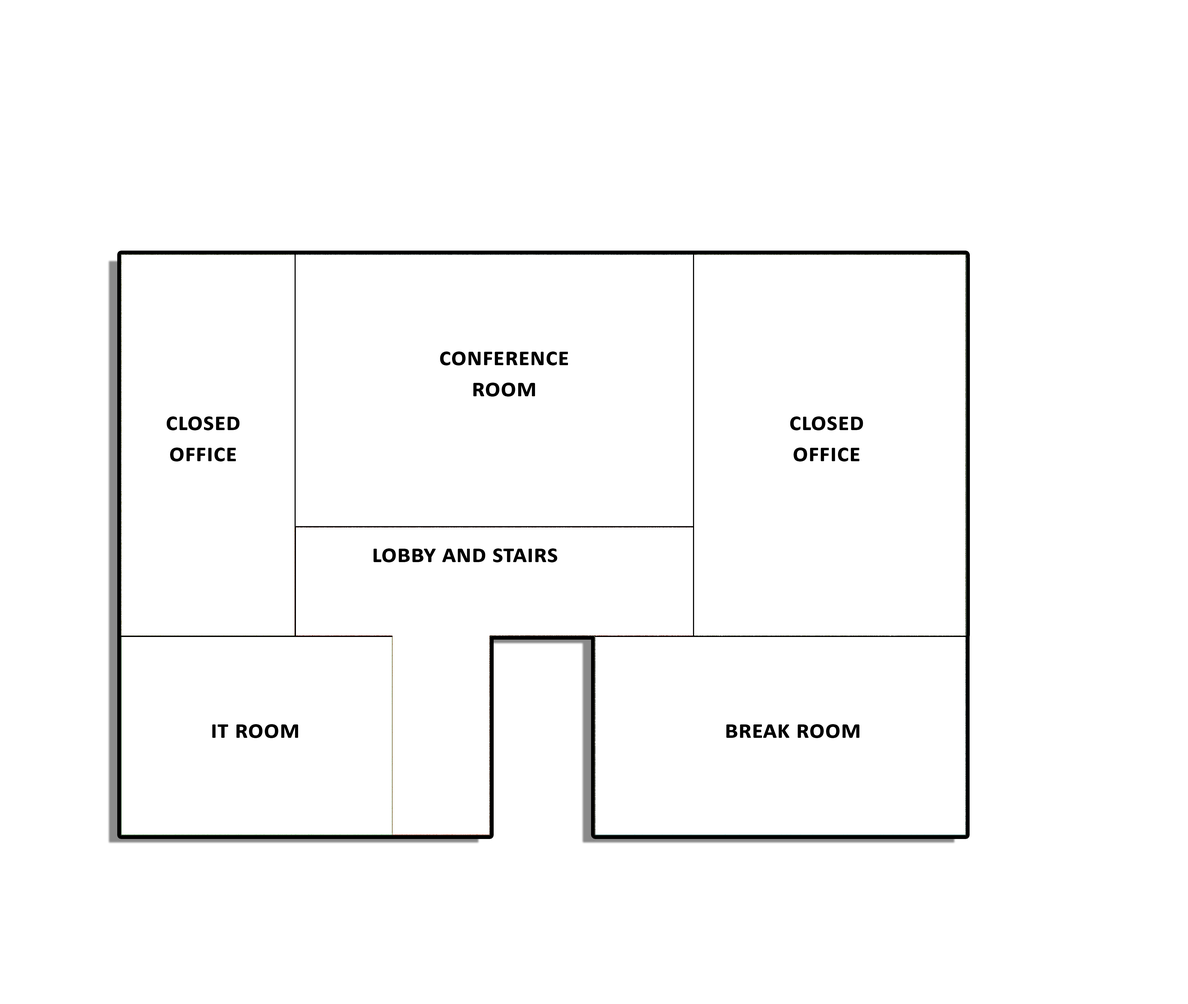
<style>
.page{position:relative;width:1188px;height:1004px;background:#ffffff}
.page>*{position:absolute;margin:0}
.t1{font:25.8px "Calibri-Bold";letter-spacing:0.006em;color:#000000;font-variant:small-caps}
</style>
<div class="page">
<p class="t1" style="left:440px;top:351px;width:128px;height:45px;text-align:center">conference <br>room</p>
<p class="t1" style="left:167px;top:416px;width:73px;height:45px;text-align:center">closed<br>office</p>
<p class="t1" style="left:790px;top:416px;width:73px;height:45px;text-align:center">closed <br>office</p>
<p class="t1" style="left:373px;top:548px;width:184px;height:14px">lobby and stairs</p>
<p class="t1" style="left:212px;top:724px;width:86px;height:14px">it room</p>
<p class="t1" style="left:726px;top:724px;width:134px;height:14px">break room</p>
</div>
